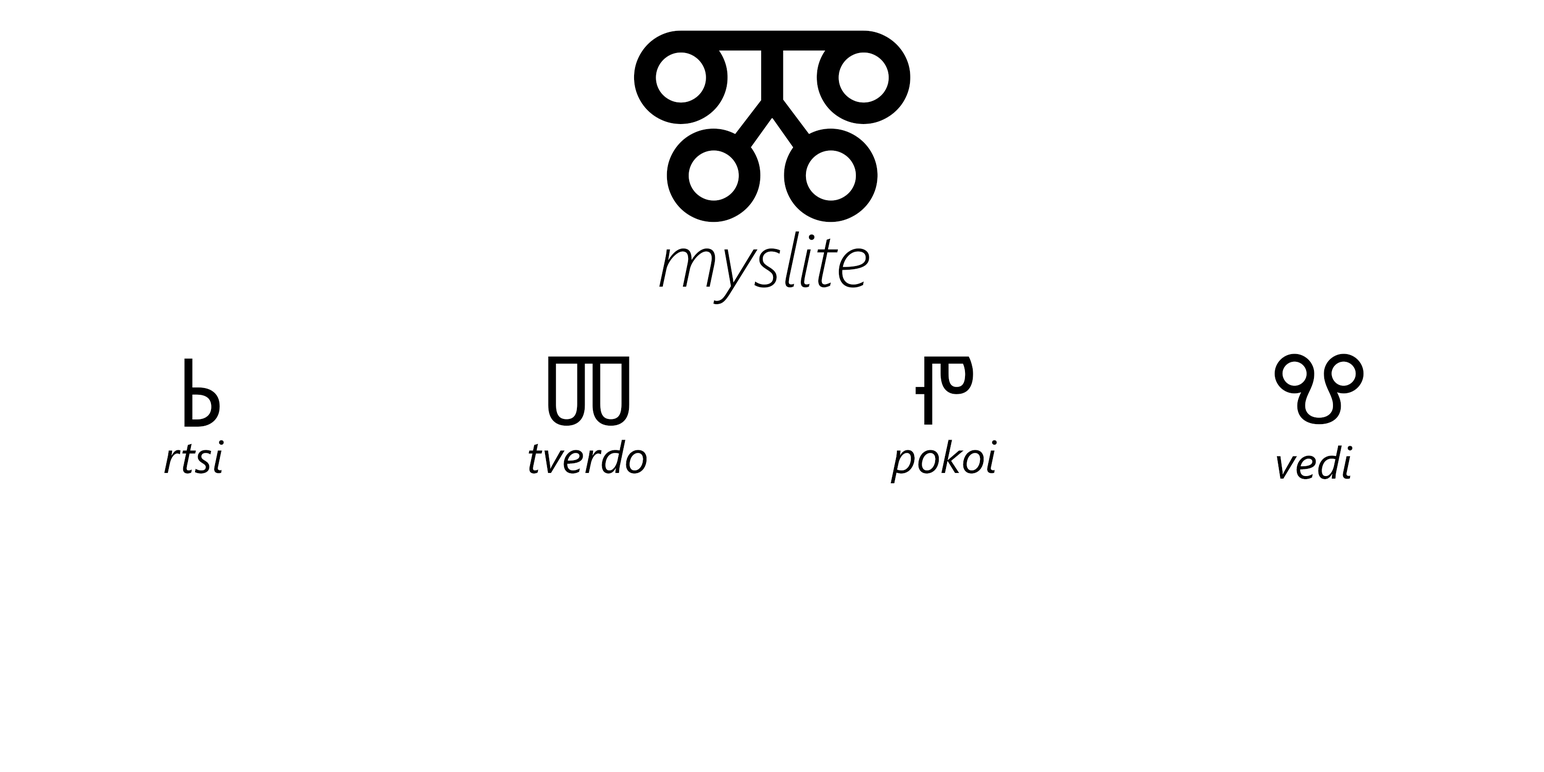
<style>
.page{position:relative;width:1544px;height:772px;background:#ffffff}
.page>*{position:absolute;margin:0}
.t1{font:268.8px "SegoeUISymbol";color:#000000}
.t2{font:74.7px "SegoeUI-LightItalic";color:#000000}
.t3{font:97.1px "SegoeUISymbol";color:#000000}
.t4{font:44.9px "SegoeUI-Italic";color:#000000}
</style>
<div class="page">
<p class="t1" style="left:634px;top:30px;width:277px;height:192px">Ⰿ</p>
<p class="t2" style="left:659px;top:231px;width:210px;height:74px">myslite</p>
<p class="t3" style="left:1275px;top:354px;width:89px;height:71px">Ⰲ</p>
<p class="t3" style="left:184px;top:358px;width:36px;height:69px">Ⱃ</p>
<p class="t3" style="left:548px;top:356px;width:82px;height:70px">Ⱅ</p>
<p class="t3" style="left:916px;top:356px;width:57px;height:69px">Ⱂ</p>
<p class="t4" style="left:164px;top:440px;width:60px;height:34px">rtsi</p>
<p class="t4" style="left:529px;top:440px;width:118px;height:34px">tverdo</p>
<p class="t4" style="left:891px;top:440px;width:106px;height:43px">pokoi</p>
<p class="t4" style="left:1277px;top:445px;width:76px;height:34px">vedi</p>
</div>
